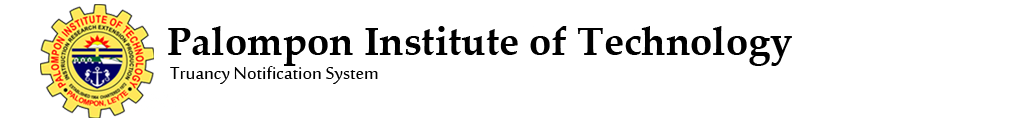
<style>
.page{position:relative;width:1017px;height:122px;background:#ffffff}
.page>*{position:absolute;margin:0}
.t1{font:40px "PalatinoLinotype-Bold";color:#000000}
.t2{font:24px "SakkalMajalla";color:#000000}
</style>
<div class="page">
<p class="t1" style="left:168px;top:26px;width:624px;height:40px">Palompon Institute of Technology</p>
<p class="t2" style="left:170px;top:66px;width:208px;height:18px">Truancy Notification System</p>
</div>
